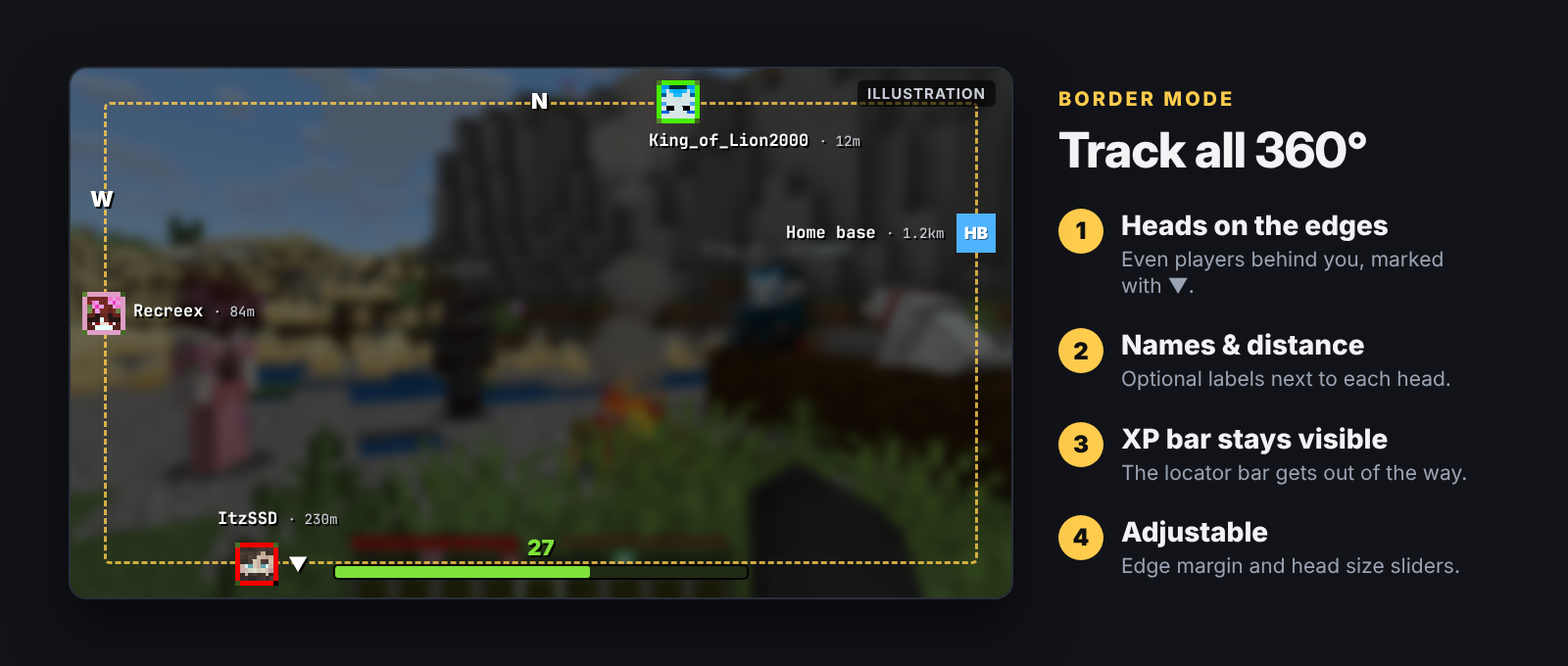
<style>
.page{position:relative;width:1568px;height:666px;background:#111318}
.page>*{position:absolute;margin:0}
.t1{font:14.7px "Inter-Bold";letter-spacing:0.067em;color:#c8ccd4}
.t2{font:21.6px "Inter-Black";color:#ffffff}
.t3{font:19.6px "Inter-ExtraBold";letter-spacing:0.15em;color:#ffcc4d}
.t4{font:16.7px "JetBrainsMono-Bold";color:#ffffff}
.t5{font:13.9px "JetBrainsMono-Medium";color:#c8ccd4}
.t6{font:49px "InterDisplay-ExtraBold";letter-spacing:-0.016em;color:#f2f3f5}
.t7{font:23.5px "Inter-Black";color:#111111}
.t8{font:27.4px "Inter-ExtraBold";color:#f2f3f5}
.t9{font:16.7px "Inter-Black";color:#ffffff}
.t10{font:20.6px/26.8px "Inter-Regular";color:#9aa3b2}
.t11{font:20.6px "Inter-Regular";color:#9aa3b2}
.t12{font:21.6px "Inter-Black";color:#7fe23a}
.t13{font:19.6px "Inter-Regular";color:#ffffff}
</style>
<div class="page">
<p class="t1" style="left:868px;top:88px;width:116px;height:12px">ILLUSTRATION</p>
<p class="t2" style="left:532px;top:93px;width:15px;height:16px">N</p>
<p class="t3" style="left:1059px;top:91px;width:173px;height:16px">BORDER MODE</p>
<p class="t4" style="left:650px;top:132px;width:210px;height:17px">King_of_Lion2000 <span class="t5">· 12m</span></p>
<p class="t6" style="left:1059px;top:131px;width:307px;height:38px">Track all 360°</p>
<p class="t2" style="left:90px;top:191px;width:24px;height:16px">W</p>
<p class="t7" style="left:1076px;top:221px;width:10px;height:18px">1</p>
<p class="t8" style="left:1122px;top:215px;width:266px;height:26px">Heads on the edges</p>
<p class="t4" style="left:787px;top:225px;width:157px;height:14px">Home base <span class="t5">· 1.2km</span></p>
<p class="t9" style="left:964px;top:226px;width:24px;height:13px">HB</p>
<p class="t10" style="left:1121px;top:251px;width:322px;height:43px">Even players behind you, marked<br>with ▼.</p>
<p class="t4" style="left:134px;top:304px;width:121px;height:14px">Recreex <span class="t5">· 84m</span></p>
<p class="t8" style="left:1122px;top:333px;width:242px;height:23px">Names &amp; distance</p>
<p class="t7" style="left:1074px;top:342px;width:14px;height:18px">2</p>
<p class="t11" style="left:1122px;top:370px;width:328px;height:21px">Optional labels next to each head.</p>
<p class="t7" style="left:1073px;top:435px;width:16px;height:19px">3</p>
<p class="t8" style="left:1121px;top:427px;width:267px;height:28px">XP bar stays visible</p>
<p class="t11" style="left:1122px;top:465px;width:344px;height:20px">The locator bar gets out of the way.</p>
<p class="t4" style="left:219px;top:512px;width:118px;height:13px">ItzSSD <span class="t5">· 230m</span></p>
<p class="t8" style="left:1121px;top:520px;width:147px;height:28px">Adjustable</p>
<p class="t7" style="left:1073px;top:528px;width:16px;height:18px">4</p>
<p class="t12" style="left:528px;top:539px;width:26px;height:17px">27</p>
<p class="t13" style="left:289px;top:557px;width:19px;height:15px">▼</p>
<p class="t11" style="left:1122px;top:558px;width:337px;height:20px">Edge margin and head size sliders.</p>
</div>
